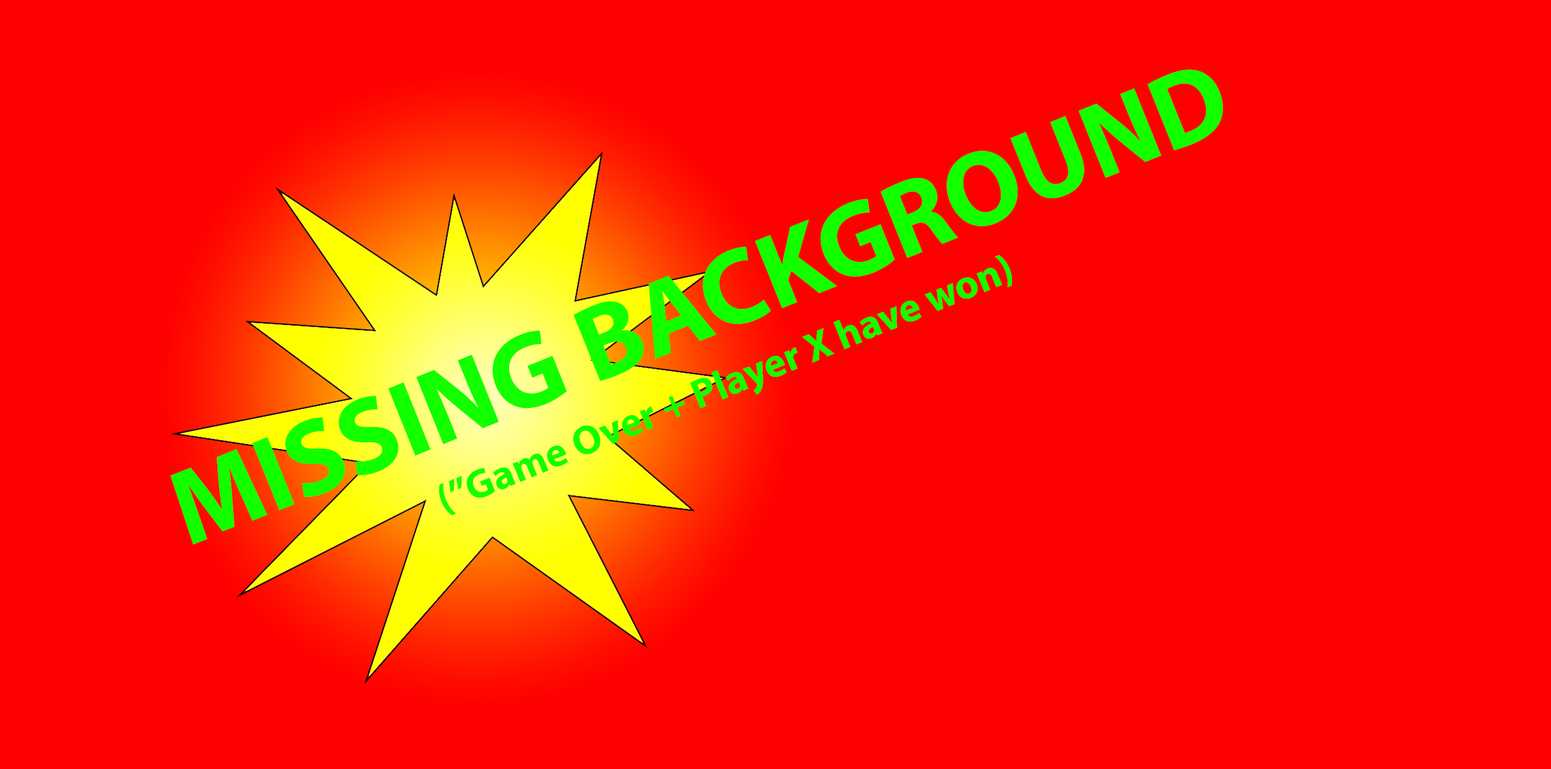
<style>
.page{position:relative;width:1551px;height:769px;background:#ff0000}
.page>*{position:absolute;margin:0}
.t1{font:107.3px "MyriadPro-Bold";color:#12ff00}
.t2{font:41.1px "MyriadPro-Bold";color:#12ff00}
</style>
<div class="page">
<p class="t1" style="left:170px;top:69px;width:1053px;height:476px;rotate:-22deg">MISSING BACKGROUND</p>
<p class="t2" style="left:439px;top:255px;width:573px;height:260px;rotate:-22deg">(”Game Over + Player X have won)</p>
</div>
